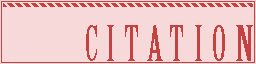
<style>
.page{position:relative;width:256px;height:64px;background:#f7d9d9}
.page>*{position:absolute;margin:0}
.t1{font:48px "BirchStd";letter-spacing:0.18em;color:#c44242}
</style>
<div class="page">
<p class="t1" style="left:86px;top:25px;width:167px;height:36px">CITATION</p>
</div>
